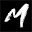
<style>
.page{position:relative;width:32px;height:32px;background:#000000}
.page>*{position:absolute;margin:0}
.t1{font:19.7px "Againts";color:#ffffff;scale:2.03 1}
</style>
<div class="page">
<p class="t1" style="left:4px;top:3px;width:25px;height:25px">M</p>
</div>
